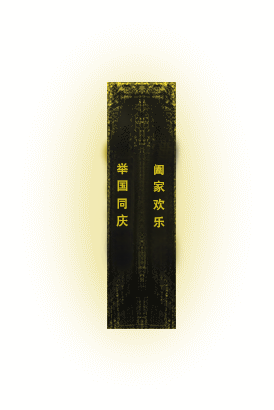
<style>
.page{position:relative;width:274px;height:410px;background:#fffffe}
.page>*{position:absolute;margin:0}
.t1{font:12px "AdobeHeitiStd-Regular";color:#ccba1d}
</style>
<div class="page">
<p class="t1" style="left:116px;top:163px;width:12px;height:64px">举  国  同  庆</p>
<p class="t1" style="left:153px;top:164px;width:12px;height:64px">阖  家  欢  乐</p>
</div>
